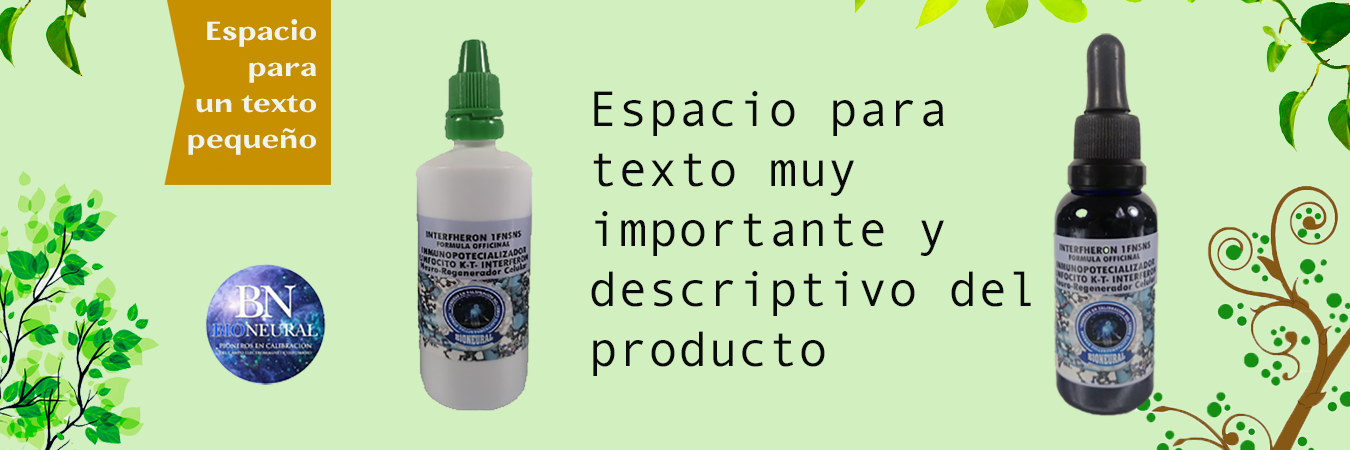
<style>
.page{position:relative;width:1350px;height:450px;background:#d2efbf}
.page>*{position:absolute;margin:0}
.t1{font:30px "JainaSans-Bold";color:#eff5ea}
.t2{font:50px "AndaleMono";color:#090a09}
</style>
<div class="page">
<p class="t1" style="left:188px;top:19px;width:128px;height:136px;text-align:right">Espacio<br>para<br>un texto<br>pequeño</p>
<p class="t2" style="left:591px;top:91px;width:440px;height:285px">Espacio para <br>texto muy <br>importante y <br>descriptivo del <br>producto</p>
</div>
